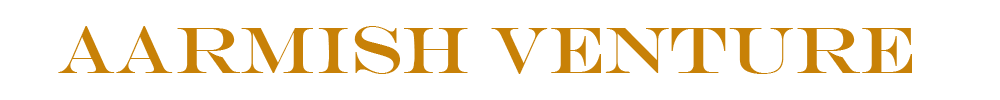
<style>
.page{position:relative;width:1000px;height:100px;background:#ffffff}
.page>*{position:absolute;margin:0}
.t1{font:66.7px "EngraversMT";color:#c88107}
</style>
<div class="page">
<p class="t1" style="left:58px;top:26px;width:854px;height:48px">Aarmish Venture</p>
</div>
